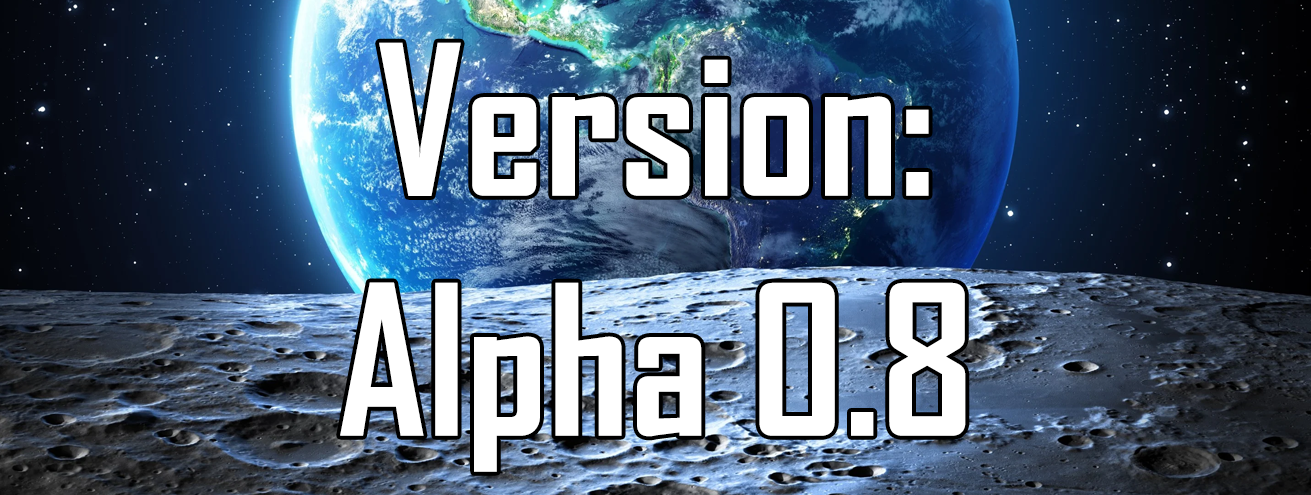
<style>
.page{position:relative;width:1311px;height:495px}
.page>*{position:absolute;margin:0}
.t1{font:200px "AgencyFB-Bold";color:#ffffff}
</style>
<div class="page">
<p class="t1" style="left:340px;top:42px;width:626px;height:430px;text-align:center">Version:<br>Alpha 0.8</p>
</div>
